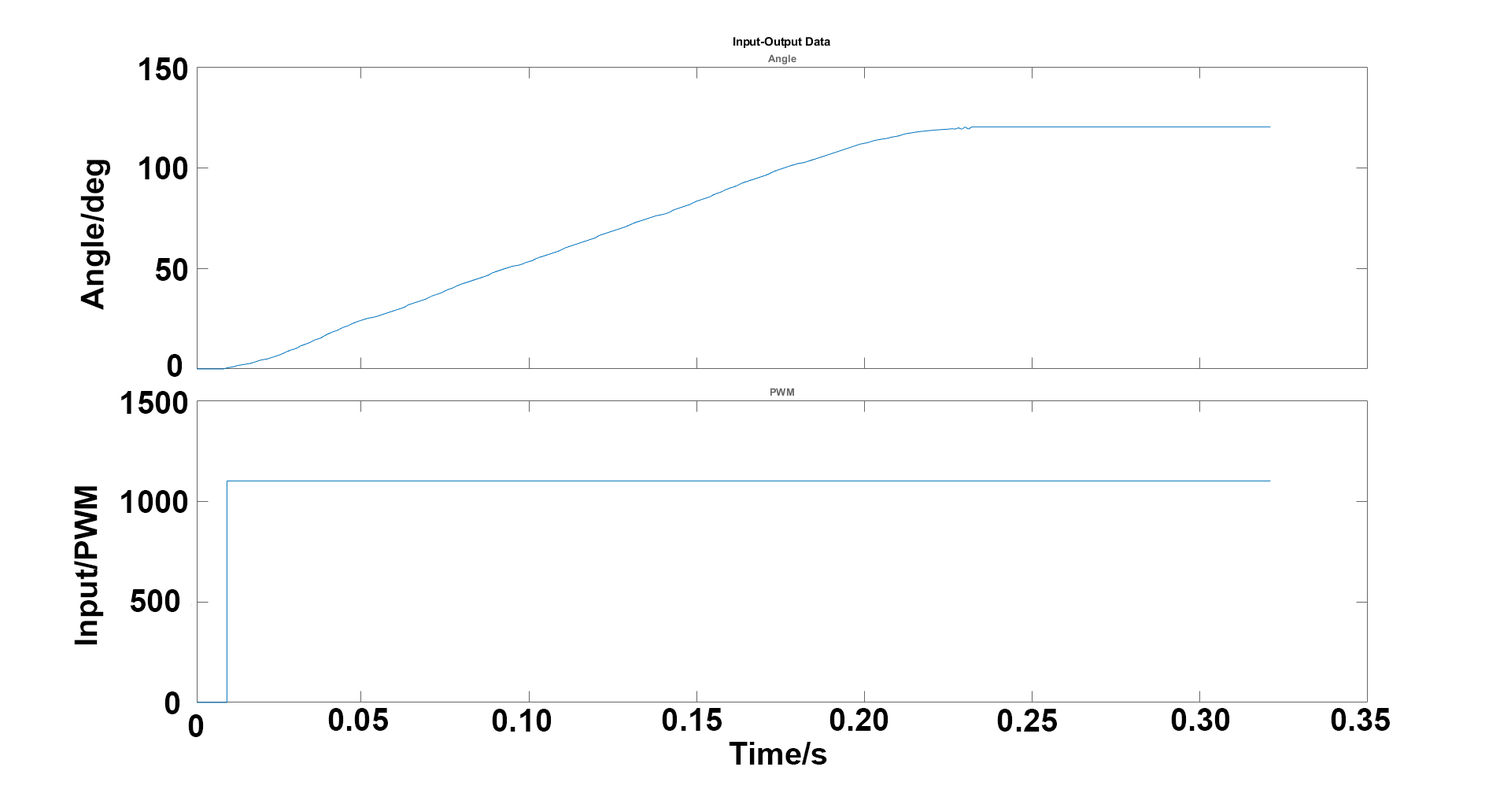
<style>
.page{position:relative;width:1511px;height:789px;background:#ffffff}
.page>*{position:absolute;margin:0}
.t1{font:31.5px "Arial-BoldMT";color:#000000}
.t2{font:31.4px "Arial-BoldMT";color:#000000}
</style>
<div class="page">
<p class="t1" style="left:139px;top:57px;width:49px;height:23px">150</p>
<p class="t1" style="left:80px;top:160px;width:30px;height:150px;rotate:-90deg">Angle/deg</p>
<p class="t1" style="left:139px;top:157px;width:49px;height:22px">100</p>
<p class="t1" style="left:155px;top:258px;width:33px;height:23px">50</p>
<p class="t1" style="left:167px;top:354px;width:16px;height:23px">0</p>
<p class="t1" style="left:121px;top:391px;width:67px;height:23px">1500</p>
<p class="t2" style="left:74px;top:486px;width:30px;height:159px;rotate:-90deg">Input/PWM</p>
<p class="t1" style="left:121px;top:490px;width:67px;height:23px">1000</p>
<p class="t1" style="left:130px;top:589px;width:50px;height:23px">500</p>
<p class="t1" style="left:164px;top:692px;width:16px;height:22px">0</p>
<p class="t1" style="left:328px;top:708px;width:60px;height:23px">0.05</p>
<p class="t1" style="left:492px;top:709px;width:60px;height:23px">0.10</p>
<p class="t1" style="left:662px;top:708px;width:60px;height:23px">0.15</p>
<p class="t1" style="left:829px;top:708px;width:59px;height:23px">0.20</p>
<p class="t1" style="left:997px;top:709px;width:60px;height:23px">0.25</p>
<p class="t1" style="left:1171px;top:708px;width:59px;height:23px">0.30</p>
<p class="t1" style="left:1331px;top:708px;width:59px;height:23px">0.35</p>
<p class="t1" style="left:188px;top:714px;width:16px;height:23px">0</p>
<p class="t1" style="left:729px;top:742px;width:98px;height:23px">Time/s</p>
</div>
